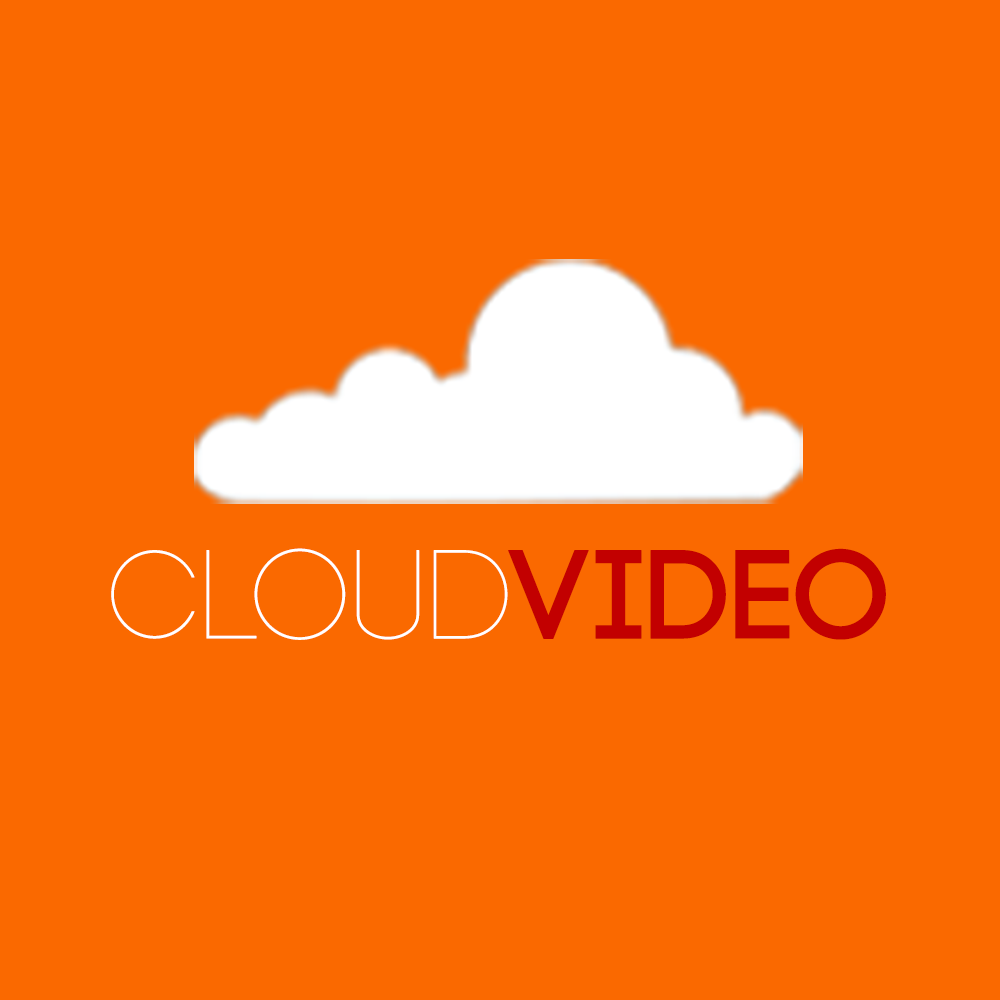
<style>
.page{position:relative;width:1000px;height:1000px;background:#fa6900}
.page>*{position:absolute;margin:0}
.t1{font:125.6px "Code-Light";color:#ffffff;font-weight:bold}
.t2{font:125.6px "Code-Bold";color:#c20000;font-weight:bold}
</style>
<div class="page">
<p class="t1" style="left:111px;top:548px;width:775px;height:92px">CLOUD<span class="t2">VIDEO</span></p>
</div>
